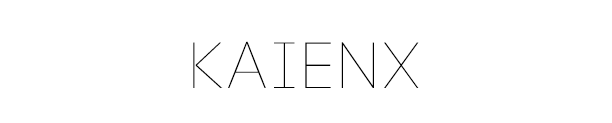
<style>
.page{position:relative;width:612px;height:123px;background:#ffffff}
.page>*{position:absolute;margin:0}
.t1{font:65px "Code-Light";letter-spacing:0.1em;color:#000000}
</style>
<div class="page">
<p class="t1" style="left:193px;top:41px;width:226px;height:47px">kaienx</p>
</div>
